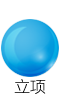
<style>
.page{position:relative;width:60px;height:96px;background:#ffffff}
.page>*{position:absolute;margin:0}
.t1{font:15.9px "MicrosoftYaHeiLight";color:#000000}
</style>
<div class="page">
<p class="t1" style="left:14px;top:79px;width:32px;height:15px">立项</p>
</div>
